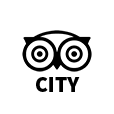
<style>
.page{position:relative;width:114px;height:114px;background:#ffffff}
.page>*{position:absolute;margin:0}
.t1{font:22.3px "SourceSansPro-Black";color:#000000}
</style>
<div class="page">
<p class="t1" style="left:36px;top:77px;width:44px;height:15px">CITY</p>
</div>
